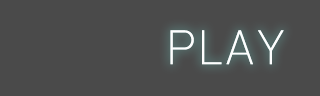
<style>
.page{position:relative;width:320px;height:96px;background:#4a4a4a}
.page>*{position:absolute;margin:0}
.t1{font:48px "DistrictPro-Thin";color:#fefefe}
</style>
<div class="page">
<p class="t1" style="left:170px;top:30px;width:114px;height:35px">P L A Y</p>
<p class="t1" style="left:170px;top:30px;width:114px;height:35px">P L A Y</p>
</div>
